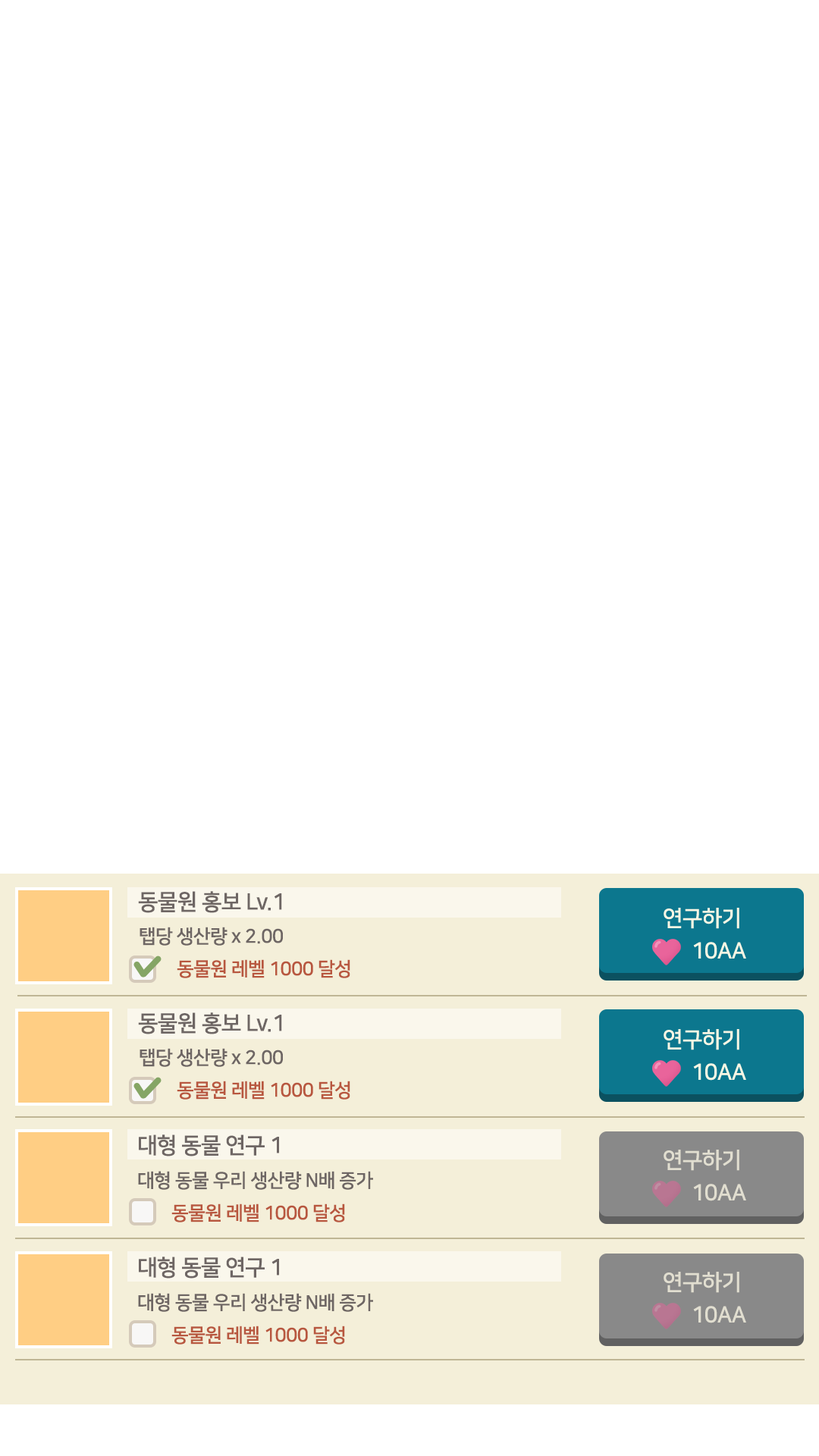
<style>
.page{position:relative;width:819px;height:1456px;background:#ffffff}
.page>*{position:absolute;margin:0}
.t1{font:22.1px "NanumSquareOTFB";letter-spacing:-0.025em;color:#6e6664}
.t2{font:19px "NanumSquareOTFB";letter-spacing:-0.025em;color:#6e6664}
.t3{font:19px "NanumSquareOTFB";letter-spacing:-0.025em;color:#b8573f}
.t4{font:22.1px "NanumSquareOTFB";letter-spacing:-0.025em;color:#e1ded0}
</style>
<div class="page">
<p class="t1" style="left:138px;top:891px;width:144px;height:22px">동물원 홍보 Lv.1</p>
<p class="t2" style="left:140px;top:927px;width:143px;height:19px">탭당 생산량 x 2.00</p>
<p class="t3" style="left:177px;top:959px;width:173px;height:19px">동물원 레벨 1000 달성</p>
<p class="t1" style="left:138px;top:1012px;width:144px;height:22px">동물원 홍보 Lv.1</p>
<p class="t2" style="left:140px;top:1048px;width:143px;height:19px">탭당 생산량 x 2.00</p>
<p class="t3" style="left:177px;top:1081px;width:173px;height:19px">동물원 레벨 1000 달성</p>
<p class="t1" style="left:139px;top:1134px;width:140px;height:22px">대형 동물 연구 1</p>
<p class="t4" style="left:664px;top:1150px;width:75px;height:21px">연구하기</p>
<p class="t2" style="left:138px;top:1171px;width:235px;height:19px">대형 동물 우리 생산량 N배 증가</p>
<p class="t4" style="left:693px;top:1184px;width:53px;height:17px">10AA</p>
<p class="t3" style="left:171px;top:1203px;width:174px;height:19px">동물원 레벨 1000 달성</p>
<p class="t1" style="left:139px;top:1257px;width:140px;height:22px">대형 동물 연구 1</p>
<p class="t4" style="left:664px;top:1272px;width:75px;height:21px">연구하기</p>
<p class="t2" style="left:138px;top:1293px;width:235px;height:19px">대형 동물 우리 생산량 N배 증가</p>
<p class="t4" style="left:693px;top:1306px;width:53px;height:17px">10AA</p>
<p class="t3" style="left:171px;top:1326px;width:174px;height:19px">동물원 레벨 1000 달성</p>
</div>
